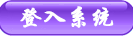
<style>
.page{position:relative;width:133px;height:36px}
.page>*{position:absolute;margin:0}
.t1{font:24px "STXingkai";letter-spacing:-0.02em;color:#ffffff;font-weight:bold}
</style>
<div class="page">
<p class="t1" style="left:20px;top:6px;width:94px;height:22px">登入系统</p>
</div>
